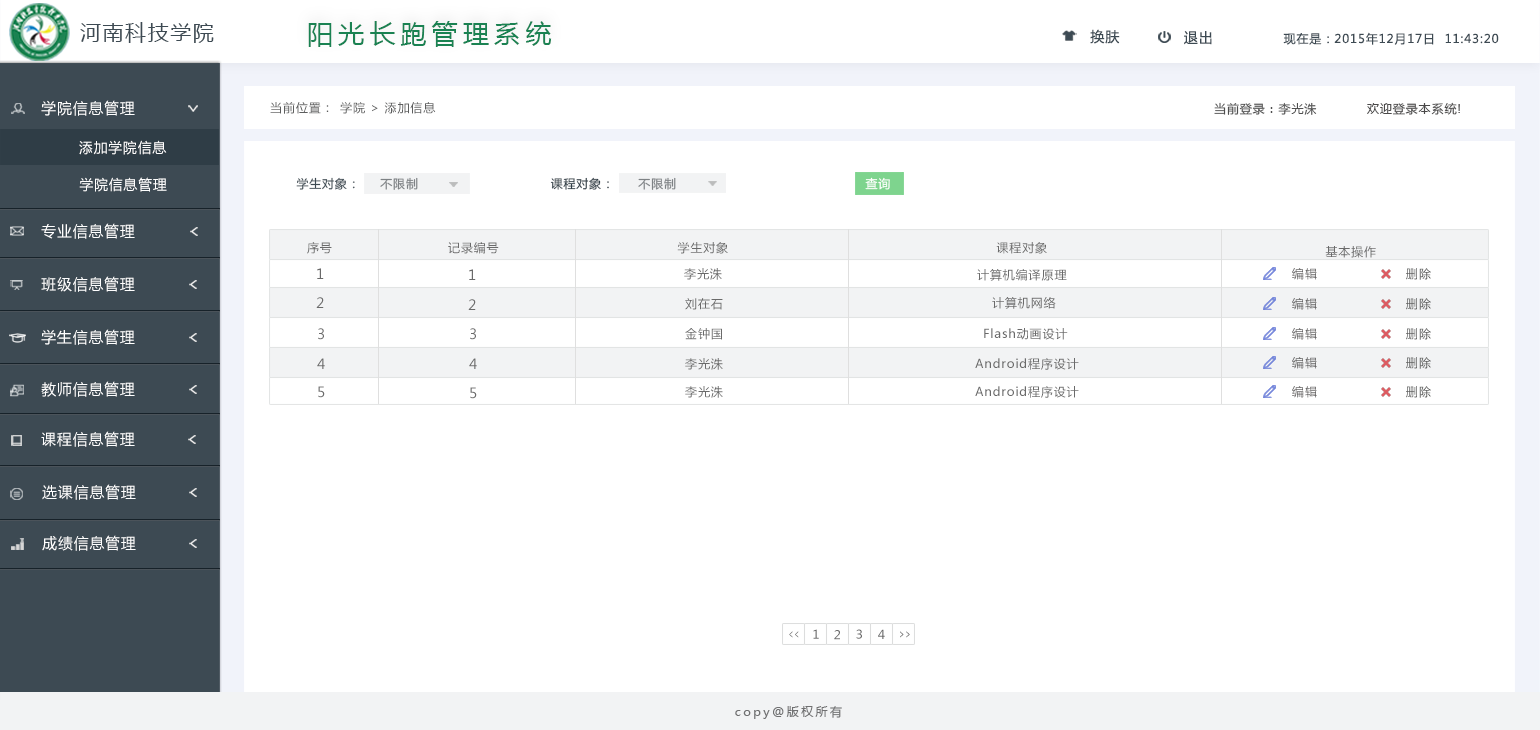
<style>
.page{position:relative;width:1540px;height:730px;background:#ffffff}
.page>*{position:absolute;margin:0}
.t1{font:21px "MicrosoftYaHei";letter-spacing:0.075em;color:#3d4a53}
.t2{font:26px "MicrosoftYaHei";letter-spacing:0.2em;color:#1a8252}
.t3{font:14px "MicrosoftYaHei";letter-spacing:0.075em;color:#3d4a53}
.t4{font:12px "MicrosoftYaHei";letter-spacing:0.075em;color:#3d4a53}
.t5{font:15px "MicrosoftYaHei";letter-spacing:0.075em;color:#ffffff}
.t6{font:12px "MicrosoftYaHei";letter-spacing:0.075em;color:#5d5e5e}
.t7{font:12px "MicrosoftYaHei";letter-spacing:0.075em;color:#4e4e4e}
.t8{font:12px "MicrosoftYaHei";letter-spacing:0.075em;color:#4a4949}
.t9{font:14px "MicrosoftYaHei";letter-spacing:0.075em;color:#ffffff}
.t10{font:12px "MicrosoftYaHei";letter-spacing:0.075em;color:#7e8285}
.t11{font:12px "MicrosoftYaHei";letter-spacing:0.075em;color:#2f3d46}
.t12{font:12px "MicrosoftYaHei";letter-spacing:0.075em;color:#fdfffd}
.t13{font:12px "MicrosoftYaHei";letter-spacing:0.075em;color:#6a6a6a}
.t14{font:14px "MicrosoftYaHei";letter-spacing:0.075em;color:#6a6a6a}
.t15{font:12px "MicrosoftYaHei";letter-spacing:0.075em}
.t16{font:12px "MicrosoftYaHei";letter-spacing:0.075em;scale:0.57 1}
.t17{font:12px "MicrosoftYaHei";letter-spacing:0.075em;scale:0.64 1}
.t18{font:12px "MicrosoftYaHei";letter-spacing:0.2em;color:#707071}
</style>
<div class="page">
<p class="t1" style="left:80px;top:22px;width:134px;height:21px">河南科技学院</p>
<p class="t2" style="left:308px;top:21px;width:244px;height:26px">阳光长跑管理系统</p>
<p class="t3" style="left:1090px;top:29px;width:30px;height:15px">换肤</p>
<p class="t3" style="left:1184px;top:31px;width:28px;height:14px">退出</p>
<p class="t4" style="left:1283px;top:33px;width:46px;height:12px">现在是：</p>
<p class="t4" style="left:1334px;top:32px;width:165px;height:13px">2015年12月17日  11:43:20</p>
<p class="t5" style="left:41px;top:100px;width:94px;height:16px">学院信息管理</p>
<p class="t6" style="left:270px;top:102px;width:59px;height:12px">当前位置：</p>
<p class="t6" style="left:340px;top:102px;width:96px;height:12px">学院 &gt; 添加信息</p>
<p class="t7" style="left:1214px;top:102px;width:103px;height:13px">当前登录：李光洙</p>
<p class="t8" style="left:1367px;top:102px;width:93px;height:13px">欢迎登录本系统!</p>
<p class="t9" style="left:79px;top:140px;width:88px;height:15px">添加学院信息</p>
<p class="t9" style="left:79px;top:177px;width:88px;height:15px">学院信息管理</p>
<p class="t4" style="left:296px;top:177px;width:59px;height:13px">学生对象：</p>
<p class="t10" style="left:380px;top:177px;width:38px;height:13px">不限制</p>
<p class="t11" style="left:550px;top:177px;width:59px;height:13px">课程对象：</p>
<p class="t10" style="left:638px;top:177px;width:38px;height:13px">不限制</p>
<p class="t12" style="left:865px;top:177px;width:25px;height:13px">查询</p>
<p class="t5" style="left:41px;top:223px;width:94px;height:16px">专业信息管理</p>
<p class="t13" style="left:307px;top:242px;width:25px;height:12px">序号</p>
<p class="t13" style="left:448px;top:242px;width:51px;height:12px">记录编号</p>
<p class="t13" style="left:677px;top:242px;width:51px;height:12px">学生对象</p>
<p class="t13" style="left:996px;top:242px;width:51px;height:12px">课程对象</p>
<p class="t13" style="left:1325px;top:246px;width:51px;height:12px">基本操作</p>
<p class="t14" style="left:317px;top:268px;width:7px;height:11px">1</p>
<p class="t14" style="left:469px;top:269px;width:7px;height:11px">1</p>
<p class="t13" style="left:684px;top:268px;width:38px;height:12px">李光洙</p>
<p class="t13" style="left:977px;top:269px;width:90px;height:12px">计算机编译原理</p>
<p class="t15" style="left:1292px;top:268px;width:25px;height:12px">编辑</p>
<p class="t15" style="left:1406px;top:268px;width:25px;height:12px">删除</p>
<p class="t5" style="left:41px;top:276px;width:94px;height:16px">班级信息管理</p>
<p class="t14" style="left:316px;top:297px;width:8px;height:11px">2</p>
<p class="t14" style="left:468px;top:299px;width:8px;height:11px">2</p>
<p class="t13" style="left:685px;top:298px;width:38px;height:12px">刘在石</p>
<p class="t13" style="left:992px;top:297px;width:64px;height:12px">计算机网络</p>
<p class="t15" style="left:1292px;top:298px;width:25px;height:12px">编辑</p>
<p class="t15" style="left:1406px;top:298px;width:25px;height:12px">删除</p>
<p class="t5" style="left:41px;top:329px;width:94px;height:16px">学生信息管理</p>
<p class="t14" style="left:318px;top:328px;width:6px;height:12px">3</p>
<p class="t14" style="left:470px;top:328px;width:6px;height:12px">3</p>
<p class="t13" style="left:685px;top:328px;width:37px;height:12px">金钟国</p>
<p class="t13" style="left:984px;top:328px;width:84px;height:12px">Flash动画设计</p>
<p class="t15" style="left:1292px;top:328px;width:25px;height:12px">编辑</p>
<p class="t15" style="left:1406px;top:328px;width:25px;height:12px">删除</p>
<p class="t14" style="left:317px;top:358px;width:8px;height:11px">4</p>
<p class="t14" style="left:469px;top:358px;width:8px;height:11px">4</p>
<p class="t13" style="left:685px;top:358px;width:38px;height:12px">李光洙</p>
<p class="t13" style="left:975px;top:358px;width:104px;height:12px">Android程序设计</p>
<p class="t15" style="left:1292px;top:357px;width:25px;height:12px">编辑</p>
<p class="t15" style="left:1406px;top:357px;width:25px;height:12px">删除</p>
<p class="t5" style="left:41px;top:381px;width:94px;height:16px">教师信息管理</p>
<p class="t14" style="left:318px;top:386px;width:7px;height:12px">5</p>
<p class="t14" style="left:470px;top:387px;width:7px;height:12px">5</p>
<p class="t13" style="left:685px;top:386px;width:38px;height:12px">李光洙</p>
<p class="t13" style="left:975px;top:386px;width:104px;height:12px">Android程序设计</p>
<p class="t15" style="left:1292px;top:386px;width:25px;height:12px">编辑</p>
<p class="t15" style="left:1406px;top:386px;width:25px;height:12px">删除</p>
<p class="t5" style="left:41px;top:431px;width:94px;height:16px">课程信息管理</p>
<p class="t5" style="left:42px;top:484px;width:94px;height:16px">选课信息管理</p>
<p class="t5" style="left:42px;top:535px;width:94px;height:16px">成绩信息管理</p>
<p class="t13" style="left:813px;top:629px;width:6px;height:10px">1</p>
<p class="t13" style="left:834px;top:630px;width:6px;height:10px">2</p>
<p class="t13" style="left:856px;top:629px;width:6px;height:10px">3</p>
<p class="t13" style="left:878px;top:629px;width:7px;height:10px">4</p>
<p class="t16" style="left:789px;top:631px;width:10px;height:7px">&lt;&lt;</p>
<p class="t17" style="left:900px;top:631px;width:10px;height:7px">&gt;&gt;</p>
<p class="t18" style="left:735px;top:706px;width:107px;height:13px">copy@版权所有</p>
</div>
